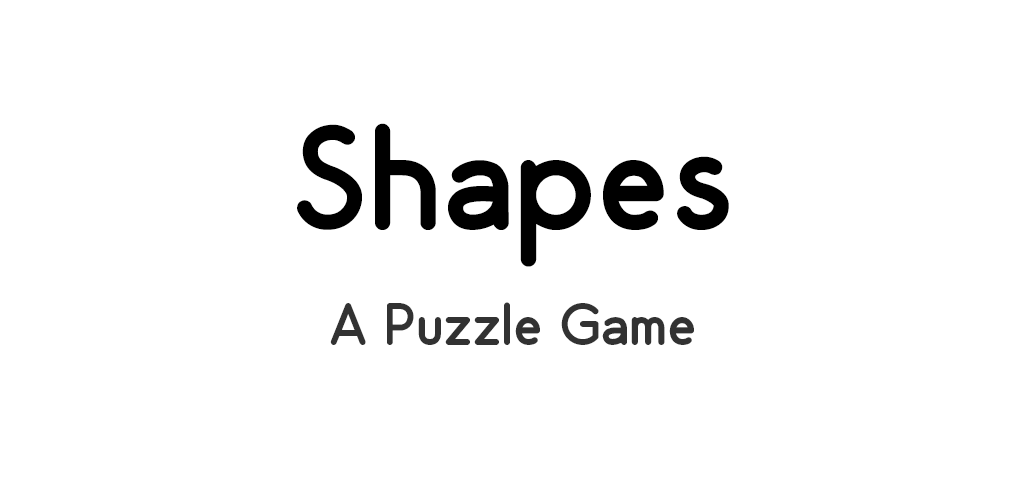
<style>
.page{position:relative;width:1024px;height:500px;background:#ffffff}
.page>*{position:absolute;margin:0}
.t1{font:150px "OdinRounded";color:#000000}
.t2{font:60px "OdinRounded";color:#323232}
</style>
<div class="page">
<p class="t1" style="left:297px;top:123px;width:432px;height:144px">Shapes</p>
<p class="t2" style="left:330px;top:302px;width:364px;height:43px">A Puzzle Game</p>
</div>
